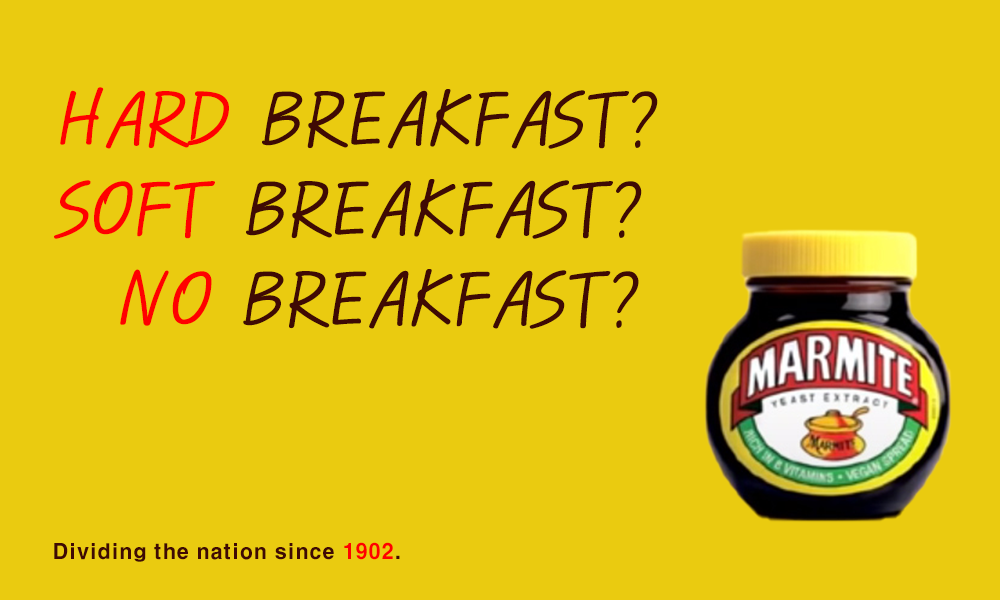
<style>
.page{position:relative;width:1000px;height:600px;background:#eacb10}
.page>*{position:absolute;margin:0}
.t1{font:75px "PyunjiR-HM";color:#3f0a04}
.t2{font:75px "PyunjiR-HM";color:#ff0000}
.t3{font:20.8px "H2gtrE";color:#3f0a04}
.t4{font:20.8px "H2gtrE";color:#ff0000}
</style>
<div class="page">
<p class="t1" style="left:54px;top:87px;width:604px;height:242px"><span class="t2">HARD</span> BREAKFAST?<br><span class="t2">SOFT</span> BREAKFAST?<br>  <span class="t2">NO</span> BREAKFAST?</p>
<p class="t3" style="left:54px;top:542px;width:346px;height:20px">Dividing the nation since <span class="t4">1902</span>.</p>
</div>
